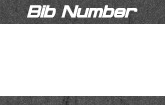
<style>
.page{position:relative;width:165px;height:105px;background:#ffffff}
.page>*{position:absolute;margin:0}
.t1{font:16px "ProbertBlack-Italic";color:#ffffff;font-weight:bold}
</style>
<div class="page">
<p class="t1" style="left:27px;top:5px;width:111px;height:13px">Bib Number</p>
</div>
